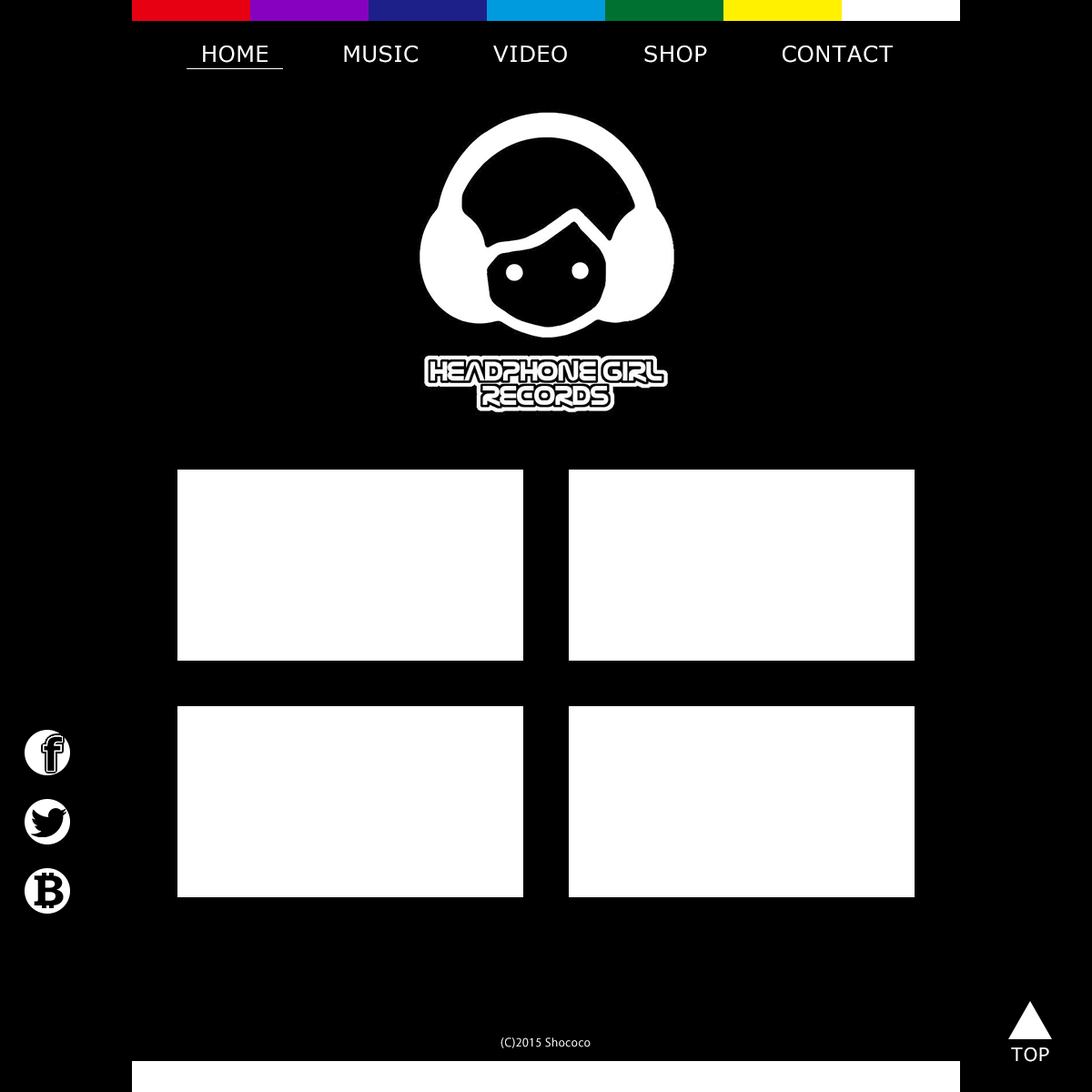
<style>
.page{position:relative;width:1092px;height:1092px;background:#000000}
.page>*{position:absolute;margin:0}
.t1{font:21.8px "Meiryo";letter-spacing:0.05em;color:#ffffff}
.t2{font:10.9px "KozGoPr6N-Regular";letter-spacing:0.05em;color:#ffffff}
.t3{font:18.2px "Meiryo";letter-spacing:0.05em;color:#ffffff}
</style>
<div class="page">
<p class="t1" style="left:203px;top:45px;width:65px;height:18px">HOME</p>
<p class="t1" style="left:344px;top:45px;width:74px;height:18px">MUSIC</p>
<p class="t1" style="left:493px;top:45px;width:74px;height:18px">VIDEO</p>
<p class="t1" style="left:644px;top:45px;width:63px;height:18px">SHOP</p>
<p class="t1" style="left:783px;top:45px;width:110px;height:18px">CONTACT</p>
<p class="t2" style="left:500px;top:1037px;width:91px;height:11px">(C)2015 Shococo</p>
<p class="t3" style="left:1011px;top:1047px;width:38px;height:15px">TOP</p>
</div>
